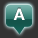
<style>
.page{position:relative;width:38px;height:38px;background:#333333}
.page>*{position:absolute;margin:0}
.t1{font:15.9px "HelveticaNeue-Bold";color:#ffffff}
</style>
<div class="page">
<p class="t1" style="left:13px;top:8px;width:12px;height:12px">A</p>
</div>
